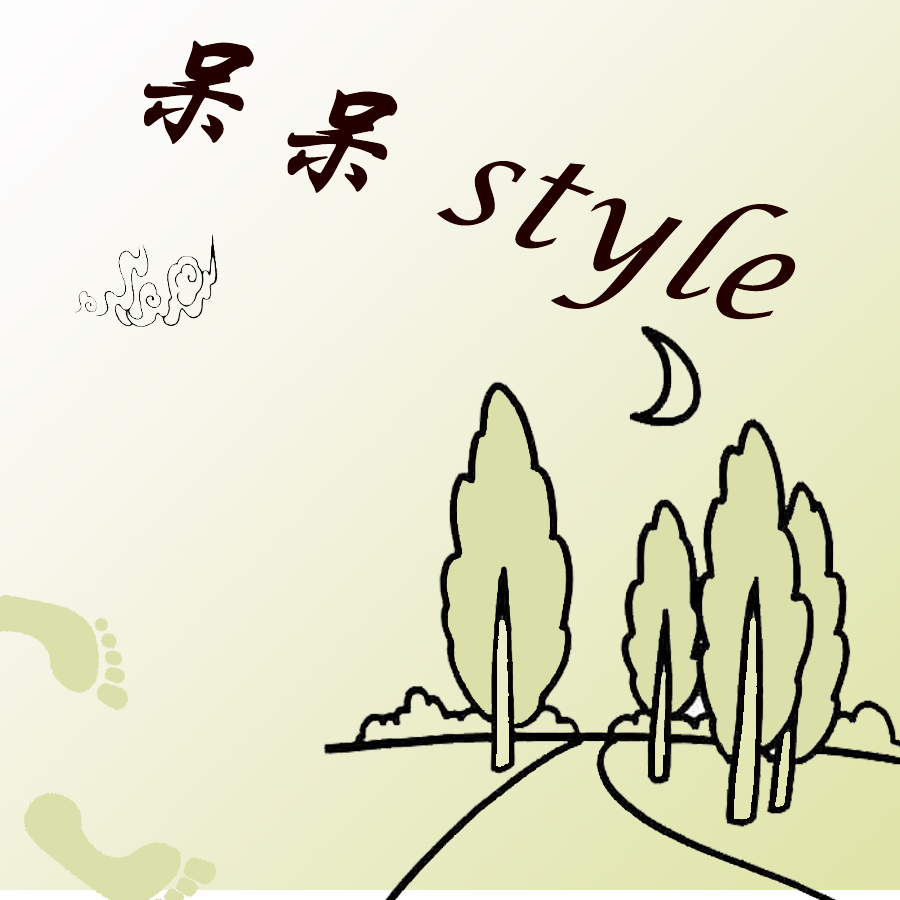
<style>
.page{position:relative;width:900px;height:900px}
.page>*{position:absolute;margin:0}
.t1{font:138.4px "LucidaCalligraphy-Italic";color:#230000;font-weight:bold;font-style:italic}
.t2{font:150px "STXingkai";color:#230000;font-weight:bold;font-style:italic}
</style>
<div class="page">
<p class="t1" style="left:144px;top:40px;width:652px;height:280px;rotate:19deg"><span class="t2">呆呆</span>style</p>
</div>
